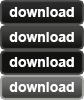
<style>
.page{position:relative;width:84px;height:100px}
.page>*{position:absolute;margin:0}
.t1{font:14px "Arial-BoldMT";color:#ffffff}
</style>
<div class="page">
<p class="t1" style="left:9px;top:7px;width:65px;height:10px">download</p>
<p class="t1" style="left:9px;top:32px;width:65px;height:10px">download</p>
<p class="t1" style="left:9px;top:57px;width:65px;height:10px">download</p>
<p class="t1" style="left:9px;top:82px;width:65px;height:10px">download</p>
</div>
